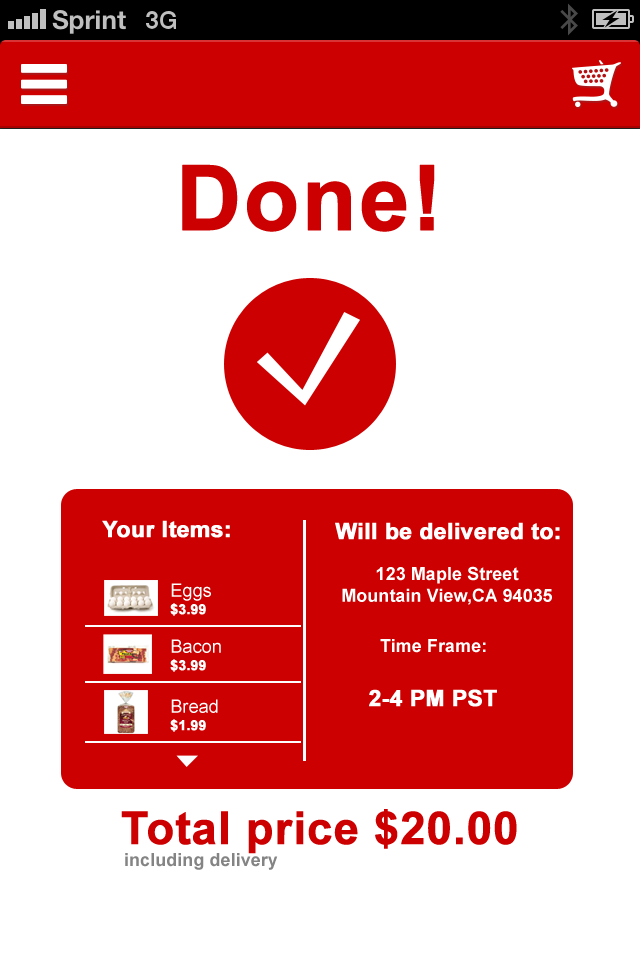
<style>
.page{position:relative;width:640px;height:960px;background:#ffffff}
.page>*{position:absolute;margin:0}
.t1{font:90.6px "Arial-BoldMT";color:#cc0000;font-weight:bold}
.t2{font:22.6px "Arial-BoldMT";color:#ffffff;font-weight:bold}
.t3{font:18.1px "Arial-BoldMT";color:#ffffff}
.t4{font:18.2px "ArialMT";color:#ffffff}
.t5{font:8.4px "Arial-BoldMT";color:#ffffff}
.t6{font:13.6px "Arial-BoldMT";color:#ffffff;font-weight:bold}
.t7{font:45.3px "Arial-BoldMT";color:#cc0000;font-weight:bold}
.t8{font:18.1px "Arial-BoldMT";color:#848484}
</style>
<div class="page">
<p class="t1" style="left:182px;top:164px;width:253px;height:68px">Done!</p>
<p class="t2" style="left:102px;top:520px;width:128px;height:18px">Your Items:</p>
<p class="t2" style="left:335px;top:522px;width:225px;height:18px">Will be delivered to:</p>
<p class="t3" style="left:342px;top:566px;width:210px;height:39px;text-align:center">123 Maple Street<br>Mountain View,CA 94035</p>
<p class="t4" style="left:171px;top:583px;width:40px;height:18px"><span class="t5"><br><br></span>Eggs</p>
<p class="t6" style="left:170px;top:603px;width:36px;height:13px">$3.99</p>
<p class="t4" style="left:171px;top:639px;width:50px;height:14px"><span class="t5"><br><br></span>Bacon</p>
<p class="t3" style="left:380px;top:639px;width:106px;height:14px">Time Frame:</p>
<p class="t6" style="left:170px;top:659px;width:36px;height:13px">$3.99</p>
<p class="t2" style="left:369px;top:689px;width:128px;height:18px">2-4 PM PST</p>
<p class="t4" style="left:171px;top:699px;width:47px;height:14px"><span class="t5"><br><br></span>Bread</p>
<p class="t6" style="left:170px;top:719px;width:36px;height:13px">$1.99</p>
<p class="t7" style="left:121px;top:809px;width:396px;height:45px">Total price $20.00</p>
<p class="t8" style="left:125px;top:853px;width:153px;height:17px">including delivery</p>
</div>
